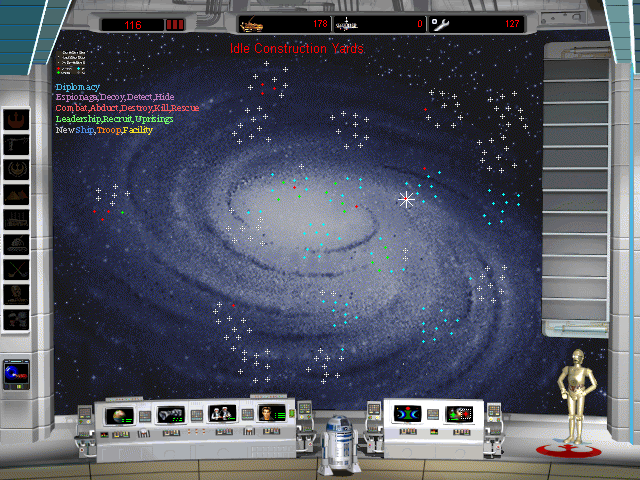
<style>
.page{position:relative;width:640px;height:480px}
.page>*{position:absolute;margin:0}
.t1{font:9px "Georgia";color:#f2585d}
.t2{font:9px "Georgia";color:#4cb6e3}
.t3{font:9px "Georgia";color:#bb7bbb}
.t4{font:9px "Georgia";color:#73fa6b}
.t5{font:9px "Georgia";color:#c1c1c1}
.t6{font:9px "Georgia";color:#4c8be1}
.t7{font:9px "Georgia";color:#f67f16}
.t8{font:9px "Georgia";color:#f0db25}
</style>
<div class="page">
<p class="t1" style="left:56px;top:83px;width:143px;height:52px"><span class="t2">Diplomacy<br></span><span class="t3">Espionage,Decoy,Detect,Hide<br></span>Combat,Abduct,Destroy,Kill,Rescue<br><span class="t4">Leadership,Recruit,Uprisings<br></span><span class="t5">New </span><span class="t6">Ship</span><span class="t5">,</span><span class="t7">Troop</span><span class="t5">,</span><span class="t8">Facility</span></p>
</div>
